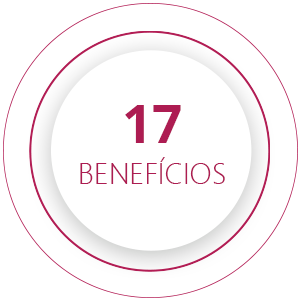
<style>
.page{position:relative;width:300px;height:300px;background:#ffffff}
.page>*{position:absolute;margin:0}
.t1{font:29.4px/41.2px "SegoeUI-Light";color:#ad1c52}
.t2{font:52.9px/41.2px "OpenSans-Bold";color:#ad1c52}
</style>
<div class="page">
<p class="t1" style="left:80px;top:105px;width:145px;height:79px;text-align:center"><span class="t2">17<br></span>BENEFÍCIOS</p>
</div>
